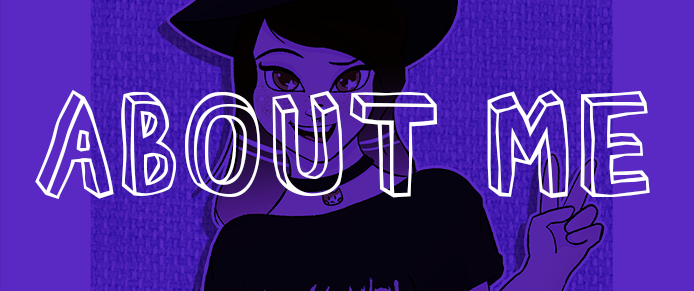
<style>
.page{position:relative;width:694px;height:291px;background:#5a29c3}
.page>*{position:absolute;margin:0}
.t1{font:140px "BlockheadOT-Plain";color:#ffffff}
</style>
<div class="page">
<p class="t1" style="left:35px;top:90px;width:615px;height:109px">ABOUT ME</p>
</div>
